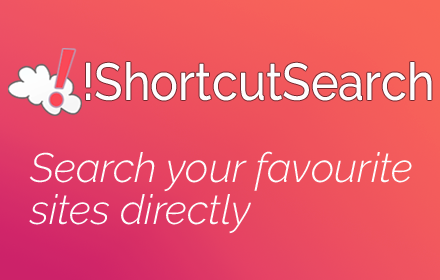
<style>
.page{position:relative;width:440px;height:280px}
.page>*{position:absolute;margin:0}
.t1{font:51.9px "Raleway-Medium";color:#fdfdfd;scale:0.9 1}
.t2{font:41.1px/41.5px "Raleway-LightItalic";color:#fdfdfd}
</style>
<div class="page">
<p class="t1" style="left:86px;top:62px;width:346px;height:39px">!ShortcutSearch</p>
<p class="t2" style="left:29px;top:151px;width:383px;height:83px">Search your favourite<br>sites directly</p>
</div>
